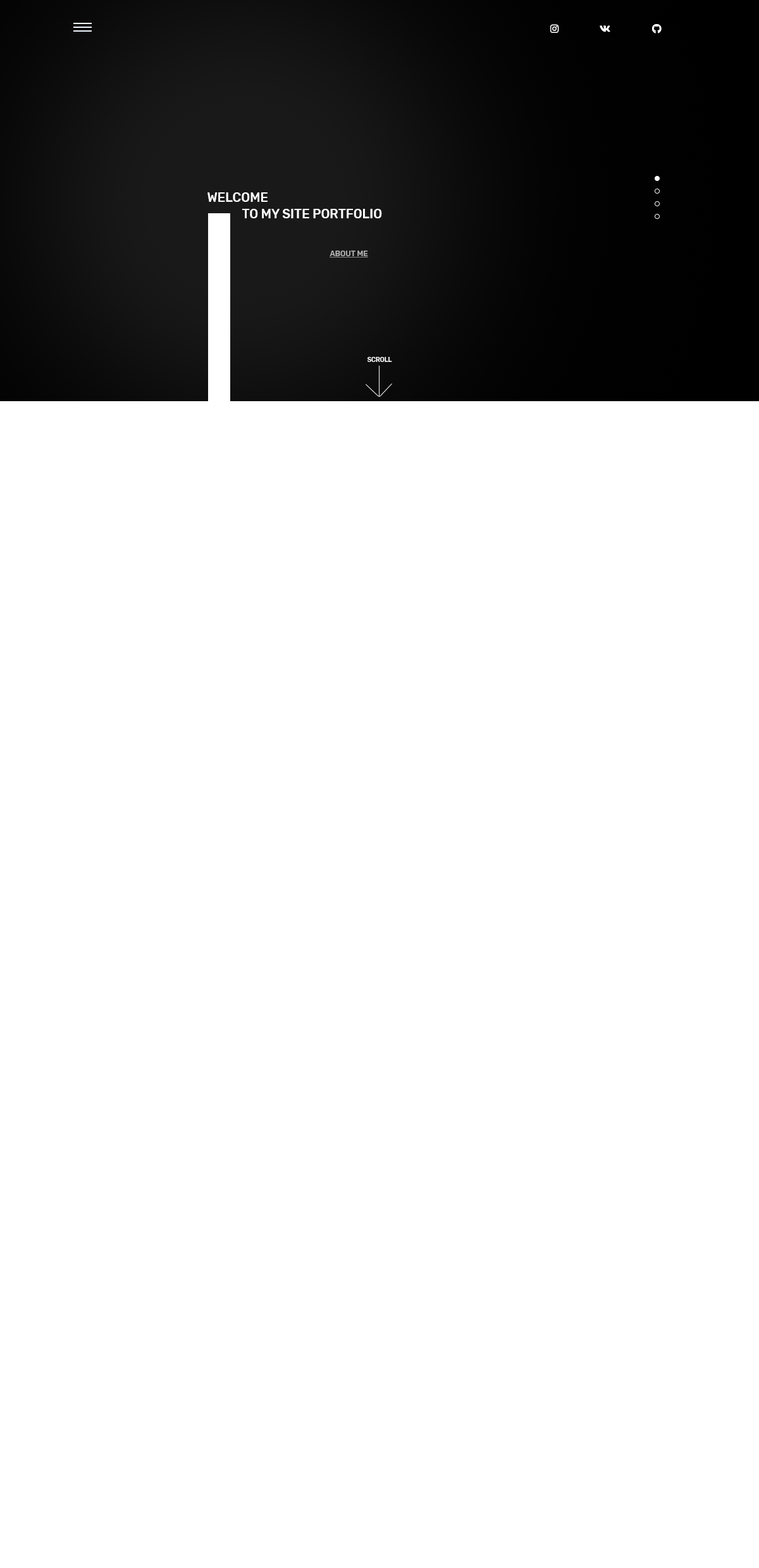
<style>
.page{position:relative;width:759px;height:1568px;background:#ffffff}
.page>*{position:absolute;margin:0}
.t1{font:12.7px "Rubik-Medium";color:#ffffff;text-transform:uppercase}
.t2{font:7.6px "Rubik-Medium";color:#afafaf;text-transform:uppercase;text-decoration:underline}
.t3{font:6.3px "Rubik-Medium";color:#ffffff;text-transform:uppercase}
</style>
<div class="page">
<p class="t1" style="left:208px;top:192px;width:60px;height:10px">welcome</p>
<p class="t1" style="left:242px;top:209px;width:140px;height:9px">TO my site portfolio</p>
<p class="t2" style="left:330px;top:251px;width:38px;height:7px">aBOUT ME</p>
<p class="t3" style="left:368px;top:357px;width:24px;height:5px">scroll</p>
</div>
